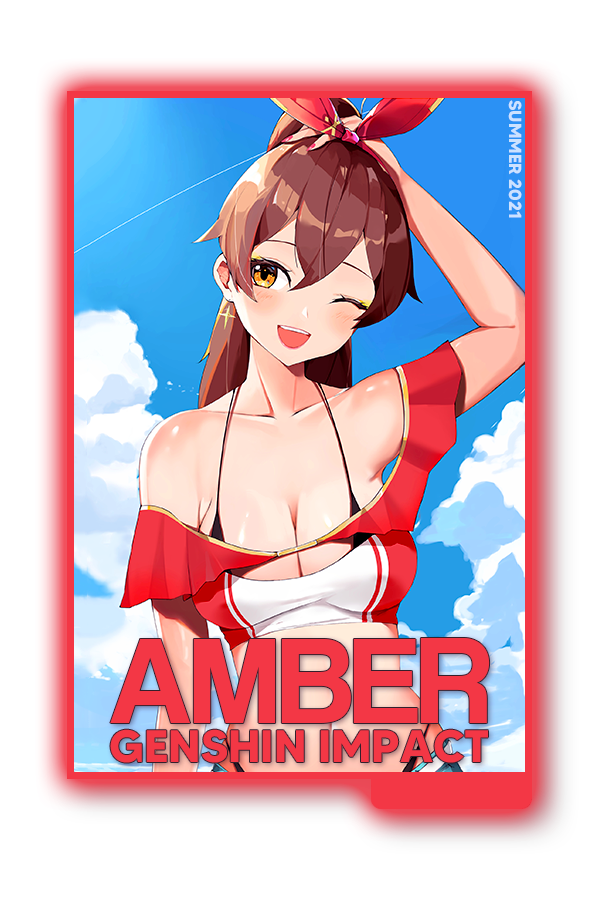
<style>
.page{position:relative;width:600px;height:900px;background:#ffffff}
.page>*{position:absolute;margin:0}
.t1{font:17.4px "MADETOMMY-Bold";color:#d1e8ff}
.t2{font:126.1px "CoolveticaRg-Regular";color:#f33745}
.t3{font:45.3px "MADETOMMY-Bold";color:#f33745}
</style>
<div class="page">
<p class="t1" style="left:508px;top:100px;width:14px;height:118px;rotate:90deg">SUMMER 2021</p>
<p class="t2" style="left:110px;top:638px;width:380px;height:85px">AMBER</p>
<p class="t3" style="left:110px;top:729px;width:378px;height:34px">GENSHIN IMPACT</p>
</div>
